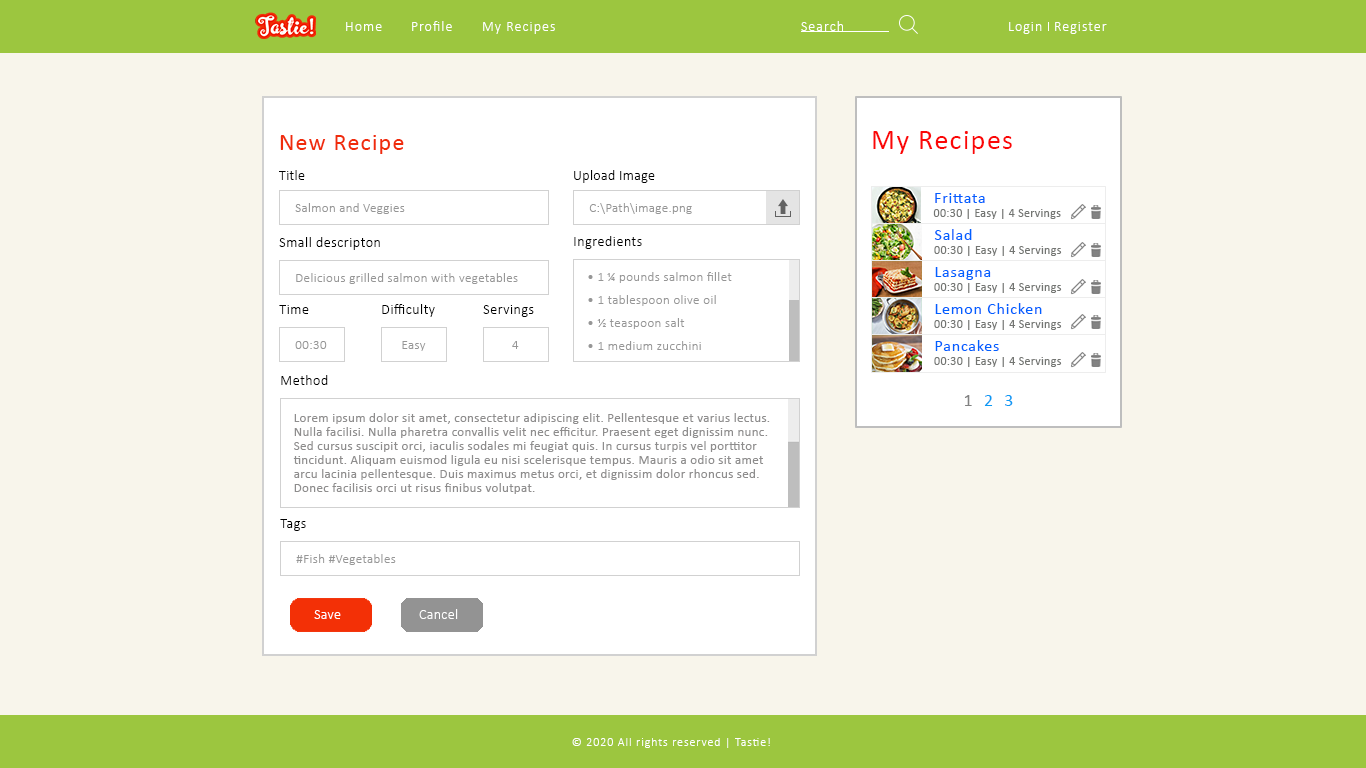
<style>
.page{position:relative;width:1366px;height:768px;background:#f8f5eb}
.page>*{position:absolute;margin:0}
.t1{font:14px "Calibri-Light";letter-spacing:0.075em;color:#ffffff}
.t2{font:24px "Calibri";letter-spacing:0.05em;color:#f02c0b}
.t3{font:28px "Calibri";letter-spacing:0.05em;color:#fb0707}
.t4{font:14px "Calibri-Light";letter-spacing:0.025em;color:#000000}
.t5{font:16px "Calibri";letter-spacing:0.05em;color:#0161ff}
.t6{font:13px "Calibri-Light";letter-spacing:0.025em;color:#969696}
.t7{font:12px "Calibri";letter-spacing:0.025em;color:#737572}
.t8{font:14px "Calibri-Light";letter-spacing:0.04em;color:#000000}
.t9{font:13px "Calibri-Light";letter-spacing:0.03em;color:#969696}
.t10{font:18px "Calibri";letter-spacing:0.2em;color:#0c9af4}
.t11{font:18px "Calibri";letter-spacing:0.2em;color:#828282}
.t12{font:13px/14px "Calibri";letter-spacing:0.025em;color:#8e8d8d}
.t13{font:14px "Calibri-Light";letter-spacing:0.025em;color:#ffffff}
.t14{font:12px "Calibri-Light";letter-spacing:0.075em;color:#ffffff}
</style>
<div class="page">
<p class="t1" style="left:346px;top:22px;width:36px;height:9px">Home</p>
<p class="t1" style="left:412px;top:21px;width:40px;height:10px">Profile</p>
<p class="t1" style="left:483px;top:22px;width:72px;height:12px">My Recipes</p>
<p class="t1" style="left:801px;top:21px;width:42px;height:10px">Search</p>
<p class="t1" style="left:1009px;top:22px;width:33px;height:12px">Login</p>
<p class="t1" style="left:1055px;top:22px;width:52px;height:12px">Register</p>
<p class="t2" style="left:280px;top:135px;width:124px;height:19px">New Recipe</p>
<p class="t3" style="left:873px;top:131px;width:139px;height:23px">My Recipes</p>
<p class="t4" style="left:279px;top:170px;width:26px;height:10px">Title</p>
<p class="t4" style="left:574px;top:170px;width:81px;height:13px">Upload Image</p>
<p class="t5" style="left:935px;top:193px;width:50px;height:10px">Frittata</p>
<p class="t6" style="left:295px;top:203px;width:110px;height:11px">Salmon and Veggies</p>
<p class="t6" style="left:589px;top:203px;width:103px;height:11px">C:\Path\image.png</p>
<p class="t7" style="left:933px;top:209px;width:128px;height:10px">00:30 | Easy | 4 Servings</p>
<p class="t5" style="left:934px;top:229px;width:38px;height:11px">Salad</p>
<p class="t8" style="left:279px;top:237px;width:101px;height:13px">Small descripton</p>
<p class="t8" style="left:574px;top:236px;width:68px;height:13px">Ingredients</p>
<p class="t7" style="left:934px;top:246px;width:128px;height:10px">00:30 | Easy | 4 Servings</p>
<p class="t5" style="left:935px;top:267px;width:56px;height:13px">Lasagna</p>
<p class="t9" style="left:296px;top:273px;width:222px;height:11px">Delicious grilled salmon with vegetables</p>
<p class="t9" style="left:588px;top:272px;width:144px;height:11px">• 1 ¼ pounds salmon fillet</p>
<p class="t7" style="left:934px;top:283px;width:128px;height:10px">00:30 | Easy | 4 Servings</p>
<p class="t8" style="left:279px;top:305px;width:30px;height:9px">Time</p>
<p class="t8" style="left:382px;top:304px;width:53px;height:13px">Difficulty</p>
<p class="t8" style="left:483px;top:305px;width:51px;height:12px">Servings</p>
<p class="t9" style="left:588px;top:295px;width:128px;height:11px">• 1 tablespoon olive oil</p>
<p class="t5" style="left:935px;top:303px;width:107px;height:11px">Lemon Chicken</p>
<p class="t9" style="left:588px;top:318px;width:97px;height:11px">• ½ teaspoon salt</p>
<p class="t7" style="left:934px;top:320px;width:128px;height:10px">00:30 | Easy | 4 Servings</p>
<p class="t9" style="left:295px;top:341px;width:32px;height:8px">00:30</p>
<p class="t9" style="left:402px;top:341px;width:24px;height:10px">Easy</p>
<p class="t9" style="left:512px;top:341px;width:7px;height:8px">4</p>
<p class="t9" style="left:588px;top:341px;width:113px;height:9px">• 1 medium zucchini</p>
<p class="t5" style="left:935px;top:340px;width:64px;height:11px">Pancakes</p>
<p class="t7" style="left:934px;top:357px;width:128px;height:10px">00:30 | Easy | 4 Servings</p>
<p class="t8" style="left:281px;top:375px;width:47px;height:10px">Method</p>
<p class="t10" style="left:964px;top:395px;width:49px;height:11px"><span class="t11">1</span> 2 3</p>
<p class="t12" style="left:293px;top:413px;width:477px;height:81px">Lorem ipsum dolor sit amet, consectetur adipiscing elit. Pellentesque et varius lectus. Nulla facilisi. Nulla pharetra convallis velit nec efficitur. Praesent eget dignissim nunc. Sed cursus suscipit orci, iaculis sodales mi feugiat quis. In cursus turpis vel porttitor tincidunt. Aliquam euismod ligula eu nisi scelerisque tempus. Mauris a odio sit amet arcu lacinia pellentesque. Duis maximus metus orci, et dignissim dolor rhoncus sed. Donec facilisis orci ut risus finibus volutpat.</p>
<p class="t8" style="left:280px;top:519px;width:26px;height:12px">Tags</p>
<p class="t9" style="left:296px;top:554px;width:100px;height:11px">#Fish #Vegetables</p>
<p class="t13" style="left:314px;top:610px;width:27px;height:9px">Save</p>
<p class="t13" style="left:419px;top:609px;width:39px;height:10px">Cancel</p>
<p class="t14" style="left:572px;top:738px;width:198px;height:10px">© 2020 All rights reserved | Tastie!</p>
</div>
